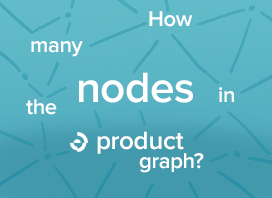
<style>
.page{position:relative;width:272px;height:198px}
.page>*{position:absolute;margin:0}
.t1{font:22px "ProximaNova-Semibold";letter-spacing:-0.015em;color:#ffffff}
.t2{font:44px "ProximaNova-Semibold";letter-spacing:-0.015em;color:#ffffff}
.t3{font:26px "ProximaNova-Semibold";letter-spacing:-0.015em;color:#ffffff}
</style>
<div class="page">
<p class="t1" style="left:149px;top:11px;width:44px;height:16px">How</p>
<p class="t1" style="left:31px;top:41px;width:52px;height:16px">many</p>
<p class="t2" style="left:79px;top:72px;width:114px;height:31px">nodes</p>
<p class="t1" style="left:219px;top:87px;width:15px;height:15px">in</p>
<p class="t1" style="left:26px;top:99px;width:31px;height:16px">the</p>
<p class="t3" style="left:97px;top:131px;width:87px;height:23px">product</p>
<p class="t1" style="left:139px;top:153px;width:65px;height:20px">graph?</p>
</div>
